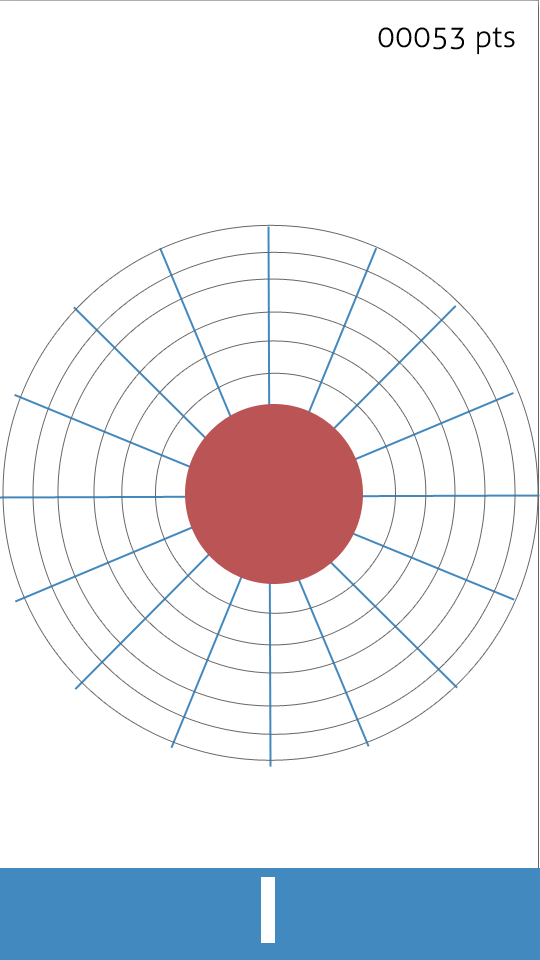
<style>
.page{position:relative;width:540px;height:960px;background:#ffffff}
.page>*{position:absolute;margin:0}
.t1{font:30px "Aller-Light";color:#000000}
</style>
<div class="page">
<p class="t1" style="left:378px;top:27px;width:137px;height:28px">00053 pts</p>
</div>
